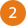
<style>
.page{position:relative;width:26px;height:26px;background:#e77817}
.page>*{position:absolute;margin:0}
.t1{font:17px "MyriadPro-Regular";color:#ffffff}
</style>
<div class="page">
<p class="t1" style="left:9px;top:7px;width:8px;height:11px">2</p>
</div>
